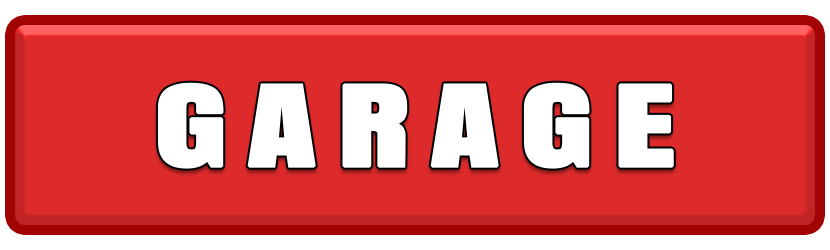
<style>
.page{position:relative;width:830px;height:250px;background:#dd2a2a}
.page>*{position:absolute;margin:0}
.t1{font:104.2px "Anton";letter-spacing:0.125em;color:#ffffff;font-weight:bold;scale:1.4 1}
</style>
<div class="page">
<p class="t1" style="left:157px;top:82px;width:517px;height:87px">GARAGE</p>
</div>
